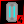
<style>
.page{position:relative;width:24px;height:24px;background:#000000}
.page>*{position:absolute;margin:0}
.t1{font:9px "Montserrat-Bold";color:#000000}
</style>
<div class="page">
<p class="t1" style="left:18px;top:16px;width:5px;height:7px">4</p>
</div>
